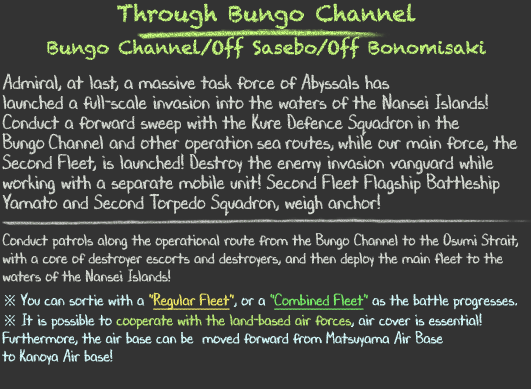
<style>
.page{position:relative;width:531px;height:389px;background:#333333}
.page>*{position:absolute;margin:0}
.t1{font:18px/36px "Chalkduster"}
.t2{font:22px/36px "Chalkduster"}
.t3{font:20px/20px "DJBChalkItUp";color:#d9ded6;scale:0.9 1}
.t4{font:16px/18px "DJBChalkItUp";color:#d9ded6;scale:0.9 1}
.t5{font:16px/24px "DJBChalkItUp";color:#d9ded6;scale:0.9 1}
.t6{font:16px/20px "TimesNewRomanPSMT";color:#d7feff;scale:0.9 1}
.t7{font:16px/20px "DJBChalkItUp";color:#d7feff;scale:0.9 1}
.t8{font:16px/20px "DJBChalkItUp";color:#f5ed68;scale:0.9 1}
.t9{font:16px/20px "DJBChalkItUp";color:#f5ed68;text-decoration:underline;scale:0.9 1}
.t10{font:16px/20px "DJBChalkItUp";color:#7bf26b;scale:0.9 1}
.t11{font:16px/20px "DJBChalkItUp";color:#7bf26b;text-decoration:underline;scale:0.9 1}
.t12{font:16px/18px "TimesNewRomanPSMT";color:#d7feff;scale:0.9 1}
.t13{font:16px/18px "DJBChalkItUp";color:#d7feff;scale:0.9 1}
.t14{font:16px/18px "DJBChalkItUp";color:#bdef78;scale:0.9 1}
</style>
<div class="page">
<p class="t1" style="left:47px;top:3px;width:439px;height:57px;text-align:center"><span class="t2">Through Bungo Channel<br></span>Bungo Channel/Off Sasebo/Off Bonomisaki</p>
<p class="t3" style="left:2px;top:73px;width:517px;height:292px">Admiral, at last, a massive task force of Abyssals has<br>launched a full-scale invasion into the waters of the Nansei Islands!<br>Conduct a forward sweep with the Kure Defence Squadron in the<br>Bungo Channel and other operation sea routes, while our main force, the<br>Second Fleet, is launched! Destroy the enemy invasion vanguard while<br>working with a separate mobile unit! Second Fleet Flagship Battleship<br>Yamato and Second Torpedo Squadron, weigh anchor!<br><br><span class="t4">Conduct patrols along the operational route from the Bungo Channel to the Osumi Strait,<br>with a core of destroyer escorts and destroyers, and then deploy the main fleet to the<br></span><span class="t5">waters of the Nansei Islands!<br></span><span class="t6">※ </span><span class="t7">You can sortie with a </span><span class="t8">"</span><span class="t9">Regular Fleet</span><span class="t8">"</span><span class="t7">, or a </span><span class="t10">"</span><span class="t11">Combined Fleet</span><span class="t10">" </span><span class="t7">as the battle progresses.<br></span><span class="t12">※</span><span class="t13"> It is possible to </span><span class="t14">cooperate with the land-based air forces</span><span class="t13">, air cover is essential!<br>Furthermore, the air base can be  moved forward from Matsuyama Air Base<br>to Kanoya Air base!</span></p>
</div>
